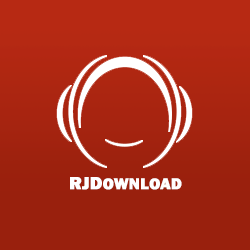
<style>
.page{position:relative;width:250px;height:250px;background:#99200d}
.page>*{position:absolute;margin:0}
.t1{font:16px "FranklinGothic-Heavy";color:#ffffff;text-transform:uppercase;font-weight:bold}
.t2{font:18px "FranklinGothic-Heavy";color:#ffffff;text-transform:uppercase;font-weight:bold}
</style>
<div class="page">
<p class="t1" style="left:70px;top:177px;width:112px;height:13px"><span class="t2">Rjd</span>ownload</p>
</div>
